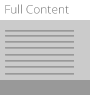
<style>
.page{position:relative;width:90px;height:95px;background:#cbcbcb}
.page>*{position:absolute;margin:0}
.t1{font:12px "OpenSans-Light";color:#777777}
</style>
<div class="page">
<p class="t1" style="left:5px;top:4px;width:64px;height:10px">Full Content</p>
</div>
